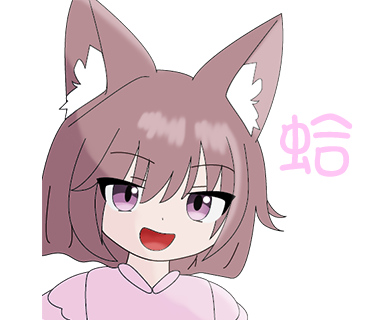
<style>
.page{position:relative;width:370px;height:320px;background:#ffffff}
.page>*{position:absolute;margin:0}
.t1{font:83.7px "ARTianniuB5-Bold";letter-spacing:-0.04em;color:#ffc6f5}
</style>
<div class="page">
<p class="t1" style="left:279px;top:113px;width:74px;height:64px">蛤</p>
</div>
